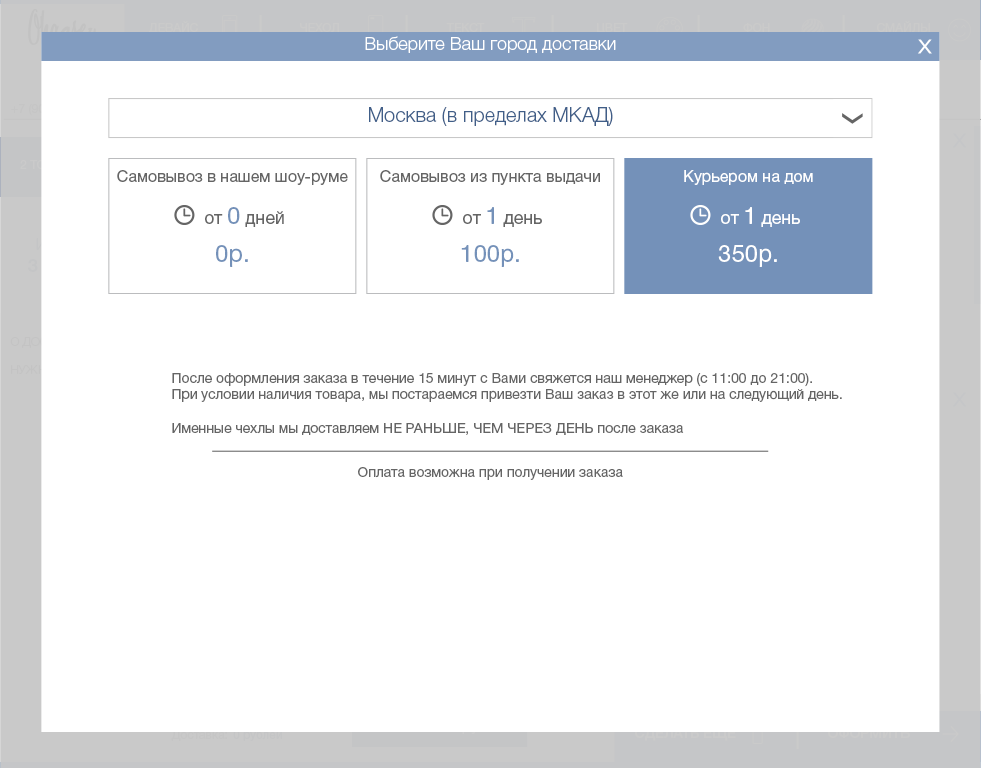
<style>
.page{position:relative;width:981px;height:768px;background:#ffffff}
.page>*{position:absolute;margin:0}
.t1{font:12px "HelveticaNeueCyr-Roman";color:#cacaca}
.t2{font:18px "HelveticaNeueCyr-Light";color:#ffffff}
.t3{font:20px "HelveticaNeueCyr-Light";color:#405e88}
.t4{font:16px "HelveticaNeueCyr-Roman";color:#656565}
.t5{font:16px "HelveticaNeueCyr-Roman";color:#ffffff}
.t6{font:17.7px "HelveticaNeueCyr-Roman";color:#656565}
.t7{font:23.6px "HelveticaNeueCyr-Roman";color:#7491b9}
.t8{font:17.7px "HelveticaNeueCyr-Roman";color:#ffffff}
.t9{font:23.6px "HelveticaNeueCyr-Roman";color:#ffffff}
.t10{font:24px "HelveticaNeueCyr-Roman";color:#7491b9}
.t11{font:24px "HelveticaNeueCyr-Roman";color:#ffffff}
.t12{font:14px "HelveticaNeueCyr-Roman";color:#656565}
.t13{font:12px "HelveticaNeueCyr-Roman";color:#c5c5c5}
</style>
<div class="page">
<p class="t1" style="left:149px;top:21px;width:49px;height:13px">ДЕВАЙС</p>
<p class="t1" style="left:300px;top:23px;width:39px;height:10px">ЧЕХОЛ</p>
<p class="t1" style="left:446px;top:23px;width:39px;height:9px">ТЕКСТ</p>
<p class="t1" style="left:597px;top:23px;width:31px;height:11px">ЦВЕТ</p>
<p class="t1" style="left:743px;top:23px;width:27px;height:9px">ФОН</p>
<p class="t1" style="left:877px;top:21px;width:53px;height:12px">СМАЙЛЫ</p>
<p class="t2" style="left:365px;top:36px;width:251px;height:17px">Выберите Ваш город доставки</p>
<p class="t3" style="left:369px;top:107px;width:244px;height:19px">Москва (в пределах МКАД)</p>
<p class="t4" style="left:117px;top:170px;width:231px;height:15px">Самовывоз в нашем шоу-руме</p>
<p class="t4" style="left:380px;top:170px;width:220px;height:15px">Самовывоз из пункта выдачи</p>
<p class="t5" style="left:684px;top:170px;width:129px;height:15px">Курьером на дом</p>
<p class="t6" style="left:205px;top:207px;width:79px;height:20px">от <span class="t7">0</span> дней</p>
<p class="t6" style="left:463px;top:207px;width:79px;height:20px">от <span class="t7">1</span> день</p>
<p class="t8" style="left:721px;top:207px;width:79px;height:20px">от <span class="t9">1</span> день</p>
<p class="t10" style="left:216px;top:245px;width:32px;height:22px">0р.</p>
<p class="t10" style="left:461px;top:245px;width:58px;height:22px">100р.</p>
<p class="t11" style="left:718px;top:245px;width:59px;height:22px">350р.</p>
<p class="t12" style="left:172px;top:373px;width:670px;height:62px">После оформления заказа в течение 15 минут с Вами свяжется наш менеджер (с 11:00 до 21:00).<br>При условии наличия товара, мы постараемся привезти Ваш заказ в этот же или на следующий день.<br><br>Именные чехлы мы доставляем НЕ РАНЬШЕ, ЧЕМ ЧЕРЕЗ ДЕНЬ после заказа</p>
<p class="t12" style="left:358px;top:467px;width:265px;height:13px">Оплата возможна при получении заказа</p>
<p class="t13" style="left:171px;top:730px;width:56px;height:11px">Доставка:</p>
</div>
